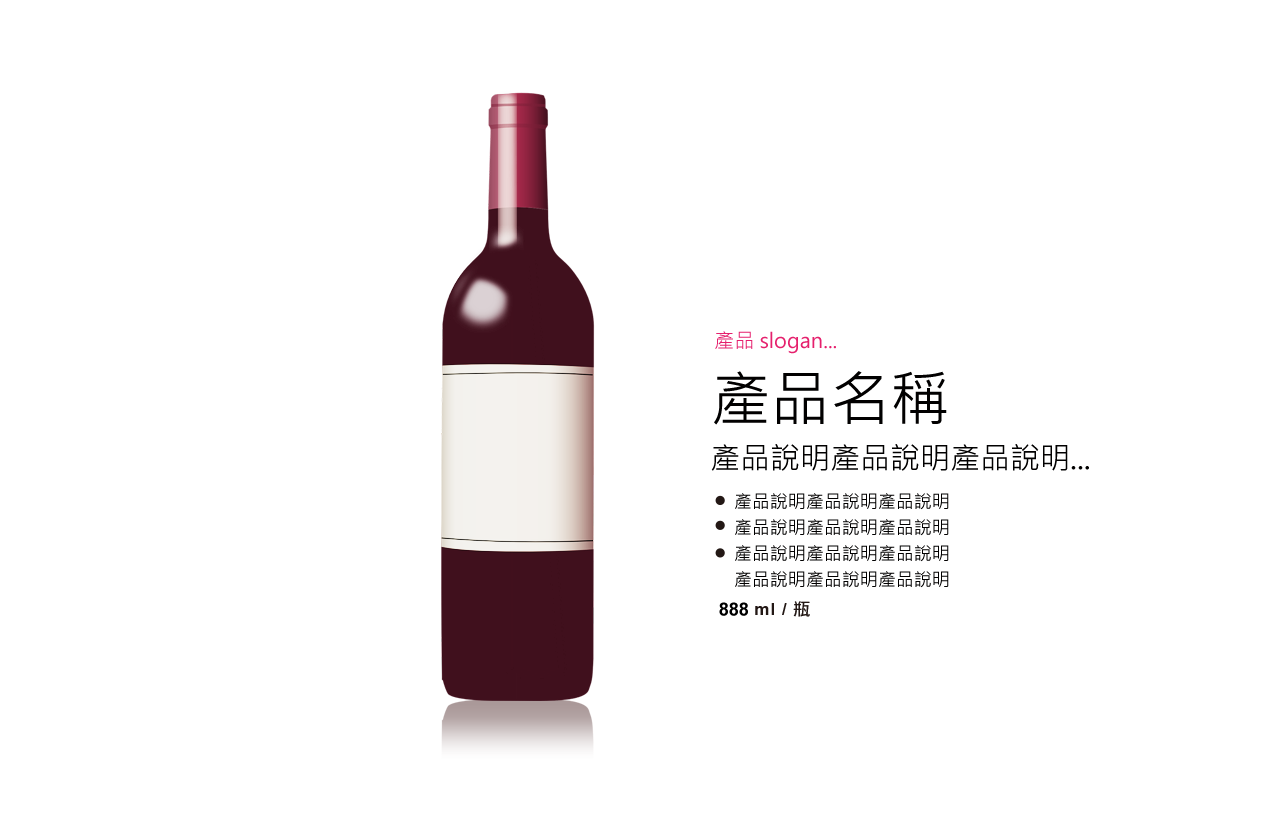
<style>
.page{position:relative;width:1282px;height:839px;background:#ffffff}
.page>*{position:absolute;margin:0}
.t1{font:20.3px "MicrosoftJhengHeiUIRegular";color:#e5206d}
.t2{font:30px/24px "MicrosoftJhengHeiUIRegular";color:#010000}
.t3{font:60px/24px "MicrosoftJhengHeiUIRegular";color:#010000}
.t4{font:18px/26px "MicrosoftJhengHeiUIRegular";color:#010000}
.t5{font:18px "Arial-BoldMT";color:#000000}
</style>
<div class="page">
<p class="t1" style="left:715px;top:331px;width:121px;height:23px">產品 slogan...</p>
<p class="t2" style="left:711px;top:371px;width:378px;height:100px"><span class="t3">產品名稱<br><br></span>產品說明產品說明產品說明...</p>
<p class="t4" style="left:735px;top:493px;width:214px;height:95px">產品說明產品說明產品說明<br>產品說明產品說明產品說明<br>產品說明產品說明產品說明<br>產品說明產品說明產品說明</p>
<p class="t5" style="left:719px;top:602px;width:29px;height:14px">888</p>
</div>
